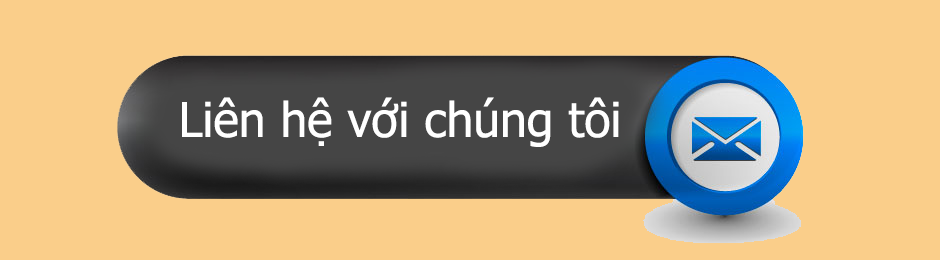
<style>
.page{position:relative;width:940px;height:260px;background:#face8a}
.page>*{position:absolute;margin:0}
.t1{font:48px "Tahoma";color:#ffffff}
</style>
<div class="page">
<p class="t1" style="left:182px;top:97px;width:437px;height:50px">Liên hệ với chúng tôi</p>
</div>
